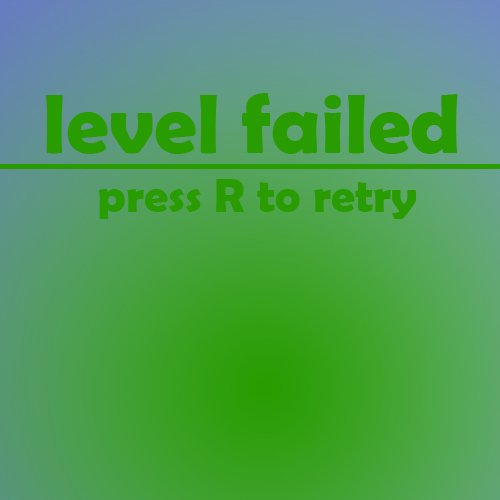
<style>
.page{position:relative;width:500px;height:500px}
.page>*{position:absolute;margin:0}
.t1{font:85.3px "BerlinSansFBDemi-Bold";color:#289c00}
.t2{font:48px "BerlinSansFBDemi-Bold";color:#289c00}
</style>
<div class="page">
<p class="t1" style="left:45px;top:93px;width:413px;height:61px">level failed</p>
<p class="t2" style="left:98px;top:179px;width:318px;height:40px">press R to retry</p>
</div>
